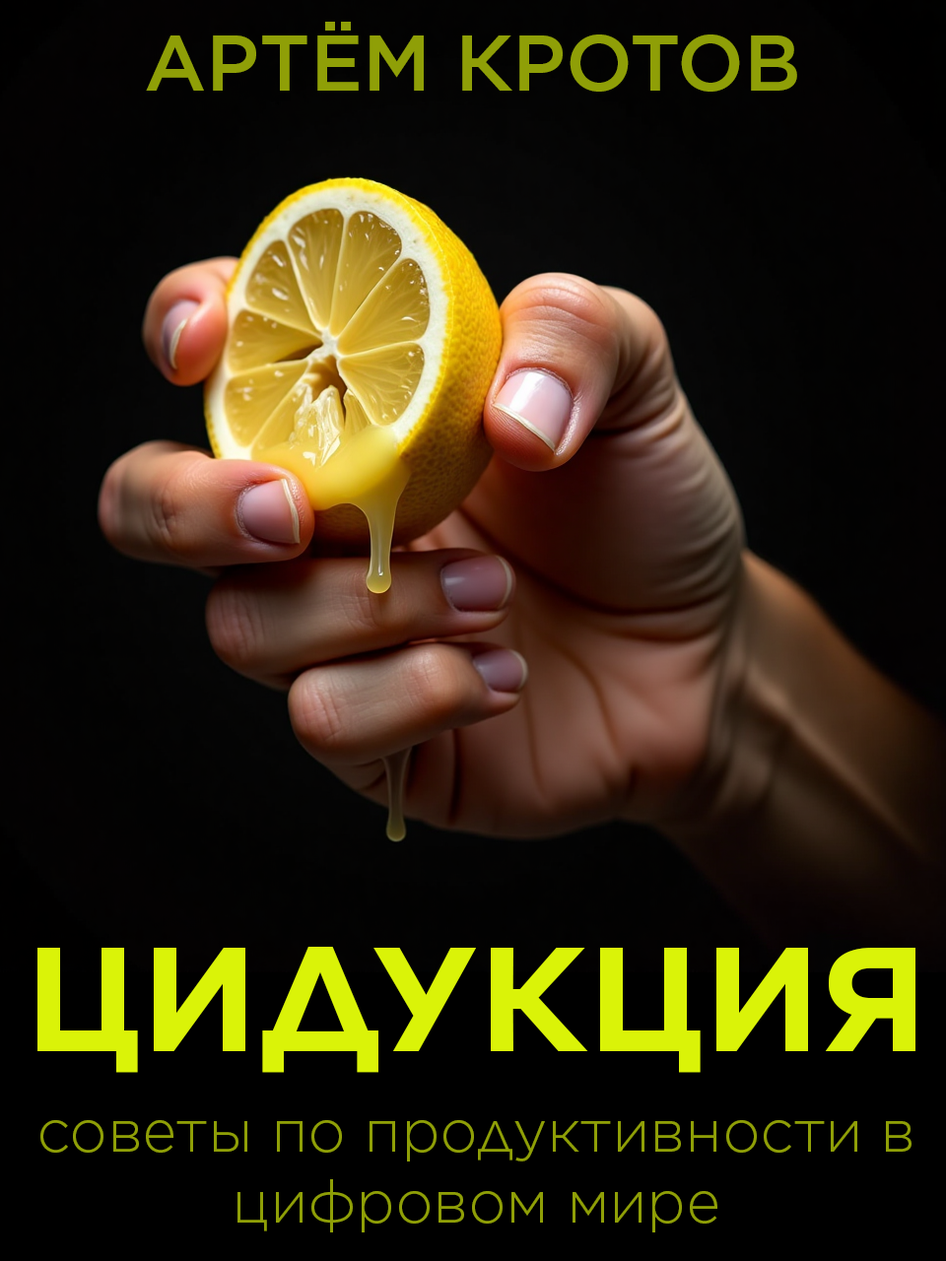
<style>
.page{position:relative;width:946px;height:1261px}
.page>*{position:absolute;margin:0}
.t1{font:78.8px "Gotham-Medium";color:#8f9f07}
.t2{font:147.8px "Gotham-Bold";color:#daf308}
.t3{font:59.1px "Gotham-Light";color:#8f9f07}
</style>
<div class="page">
<p class="t1" style="left:146px;top:22px;width:651px;height:70px">АРТЁМ КРОТОВ</p>
<p class="t2" style="left:37px;top:947px;width:878px;height:126px">ЦИДУКЦИЯ</p>
<p class="t3" style="left:40px;top:1120px;width:871px;height:112px;text-align:center">советы по продуктивности в цифровом мире</p>
</div>
